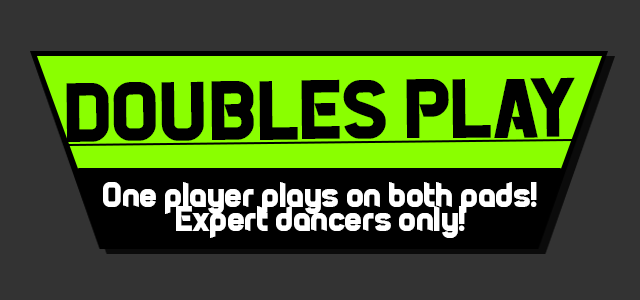
<style>
.page{position:relative;width:640px;height:300px;background:#333333}
.page>*{position:absolute;margin:0}
.t1{font:86px "PiratesofCydonia";color:#000000}
.t2{font:36px/24px "PiratesofCydonia";color:#ffffff}
</style>
<div class="page">
<p class="t1" style="left:66px;top:77px;width:509px;height:65px;rotate:-1deg">DOUBLES PLAY</p>
<p class="t2" style="left:103px;top:182px;width:434px;height:56px;text-align:center">One player plays on both pads!<br>Expert dancers only!</p>
</div>
